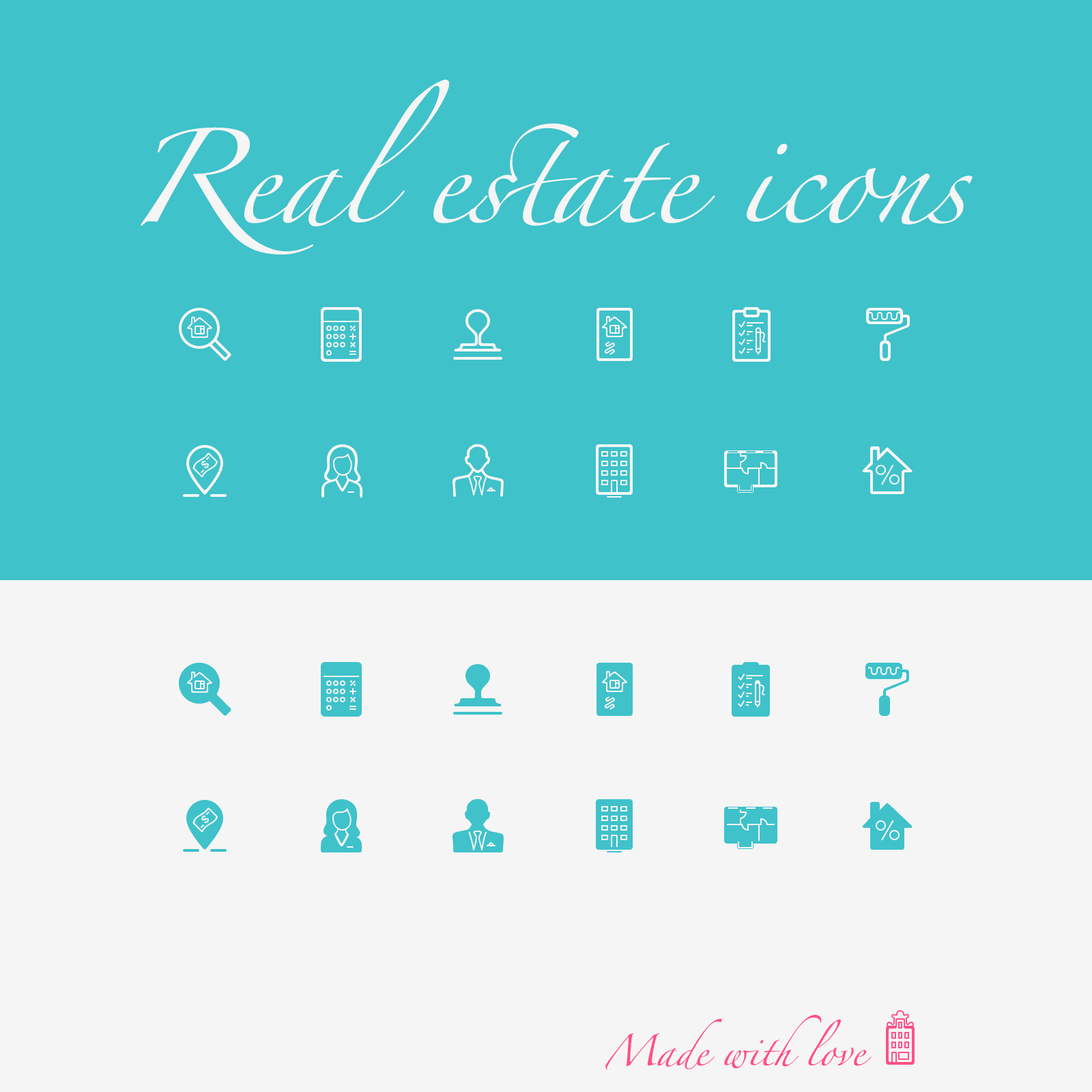
<style>
.page{position:relative;width:1092px;height:1092px;background:#3fc2ca}
.page>*{position:absolute;margin:0}
.t1{font:84.6px "Zapfino";color:#f5f5f5}
.t2{font:27.3px "Zapfino";color:#fd5185}
</style>
<div class="page">
<p class="t1" style="left:141px;top:79px;width:832px;height:176px;text-align:center">Real estate icons</p>
<p class="t2" style="left:605px;top:1015px;width:267px;height:55px;text-align:center">Made with love</p>
</div>
